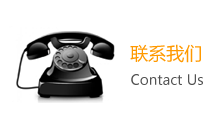
<style>
.page{position:relative;width:220px;height:133px;background:#ffffff}
.page>*{position:absolute;margin:0}
.t1{font:18px "MicrosoftYaHei";color:#ff9900}
.t2{font:14px "MicrosoftYaHei";color:#535353}
</style>
<div class="page">
<p class="t1" style="left:130px;top:44px;width:71px;height:19px">联系我们</p>
<p class="t2" style="left:131px;top:74px;width:72px;height:11px">Contact Us</p>
</div>
